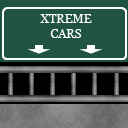
<style>
.page{position:relative;width:128px;height:128px;background:#205340}
.page>*{position:absolute;margin:0}
.t1{font:12px "Georgia";color:#ffffff}
</style>
<div class="page">
<p class="t1" style="left:40px;top:14px;width:52px;height:24px;text-align:center">XTREME<br>CARS</p>
</div>
